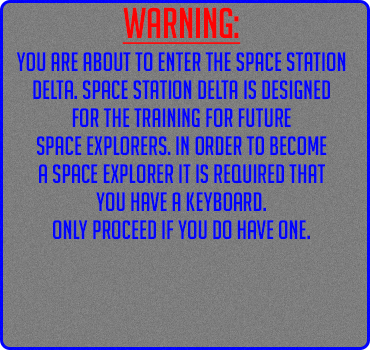
<style>
.page{position:relative;width:370px;height:350px}
.page>*{position:absolute;margin:0}
.t1{font:42px "BigNoodleTitling";color:#fc0303;text-decoration:underline}
.t2{font:26px/28px "BigNoodleTitling";color:#0202fd}
</style>
<div class="page">
<p class="t1" style="left:122px;top:7px;width:119px;height:37px">Warning:</p>
<p class="t2" style="left:16px;top:52px;width:330px;height:187px;text-align:center">you are about to enter the SPace station<br>Delta. space station delta is designed<br>for the training for future<br>space explorers. in order to become<br>a space explorer it is required that<br>you have a keyboard.<br>Only Proceed if you do have one.</p>
</div>
